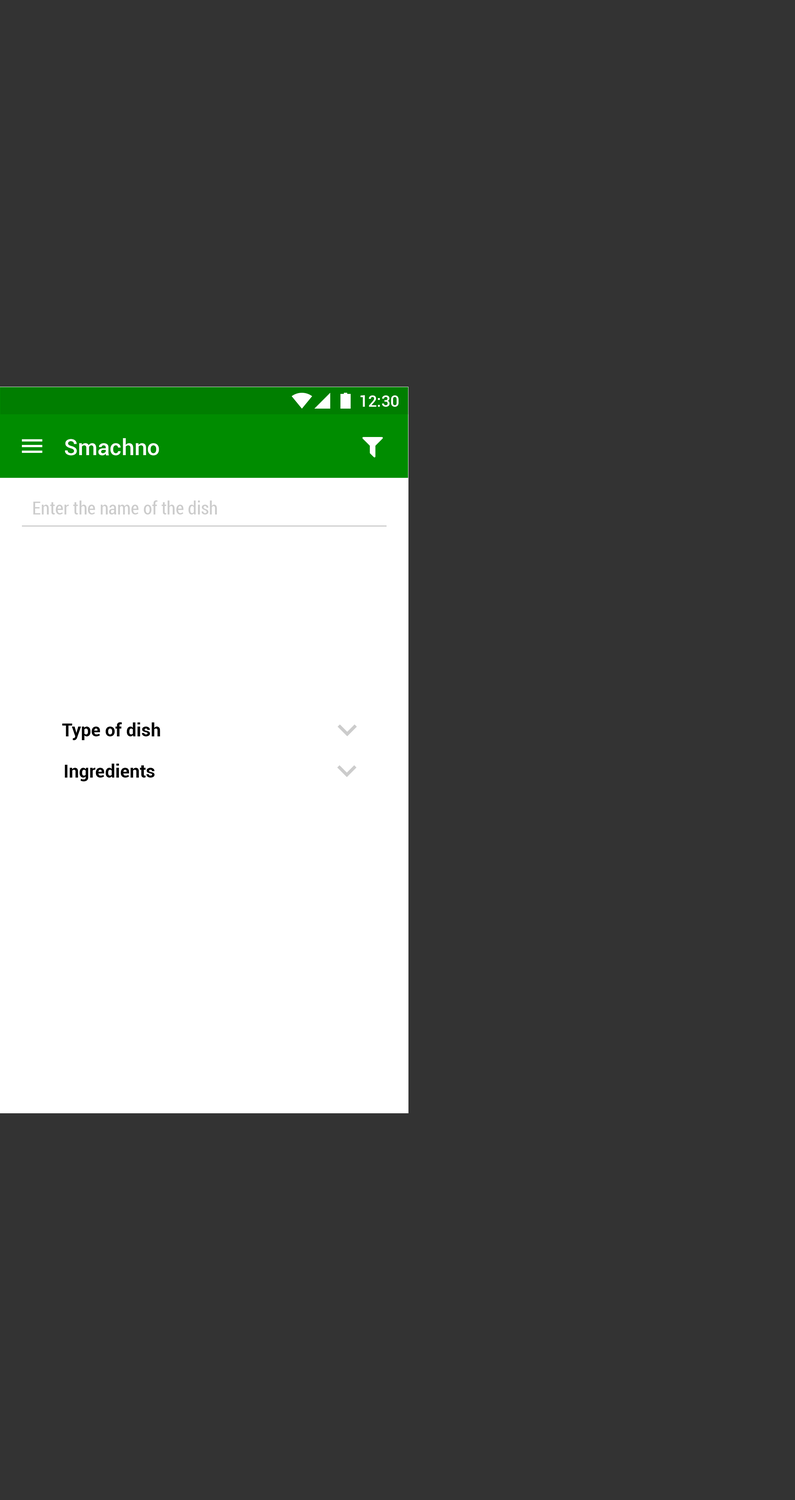
<style>
.page{position:relative;width:795px;height:1500px;background:#333333}
.page>*{position:absolute;margin:0}
.t1{font:15.9px "Roboto-Medium";color:#ffffff}
.t2{font:22.7px "Roboto-Medium";color:#ffffff}
.t3{font:18.1px "Roboto-Condensed";color:#cccccc}
.t4{font:18.1px "Roboto-Bold";color:#000000}
</style>
<div class="page">
<p class="t1" style="left:361px;top:395px;width:38px;height:12px">12:30</p>
<p class="t2" style="left:65px;top:438px;width:94px;height:17px">Smachno</p>
<p class="t3" style="left:33px;top:500px;width:184px;height:14px">Enter the name of the dish</p>
<p class="t4" style="left:62px;top:722px;width:98px;height:18px">Type of dish</p>
<p class="t4" style="left:65px;top:763px;width:90px;height:18px">Ingredients</p>
</div>
